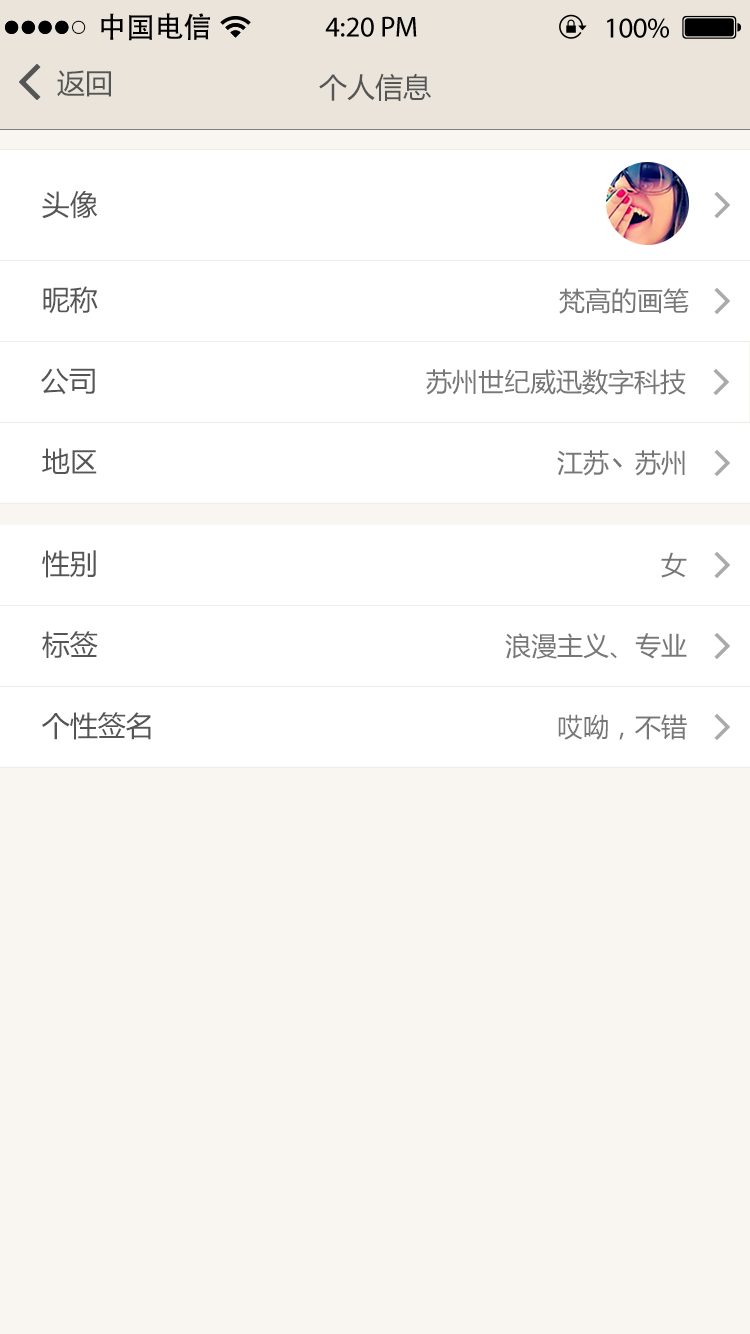
<style>
.page{position:relative;width:750px;height:1334px;background:#f9f5f1}
.page>*{position:absolute;margin:0}
.t1{font:28.8px "AdobeHeitiStd-Regular";color:#000000}
.t2{font:28.8px "MyriadPro-Regular";color:#000000}
.t3{font:28px "MicrosoftYaHei";color:#555555}
.t4{font:26px "MicrosoftYaHei";color:#777777}
</style>
<div class="page">
<p class="t1" style="left:101px;top:13px;width:109px;height:28px">中国电信</p>
<p class="t2" style="left:325px;top:16px;width:92px;height:21px">4:20 PM</p>
<p class="t2" style="left:607px;top:18px;width:62px;height:20px">100%</p>
<p class="t3" style="left:57px;top:70px;width:54px;height:27px">返回</p>
<p class="t3" style="left:319px;top:73px;width:112px;height:28px">个人信息</p>
<p class="t3" style="left:42px;top:191px;width:56px;height:28px">头像</p>
<p class="t3" style="left:43px;top:286px;width:55px;height:28px">昵称</p>
<p class="t4" style="left:559px;top:288px;width:130px;height:26px">梵高的画笔</p>
<p class="t3" style="left:41px;top:368px;width:54px;height:27px">公司</p>
<p class="t4" style="left:426px;top:369px;width:260px;height:26px">苏州世纪威迅数字科技</p>
<p class="t3" style="left:42px;top:448px;width:55px;height:26px">地区</p>
<p class="t4" style="left:557px;top:450px;width:128px;height:26px">江苏丶苏州</p>
<p class="t3" style="left:42px;top:550px;width:54px;height:28px">性别</p>
<p class="t4" style="left:661px;top:552px;width:26px;height:26px">女</p>
<p class="t3" style="left:42px;top:631px;width:56px;height:27px">标签</p>
<p class="t4" style="left:505px;top:633px;width:182px;height:26px">浪漫主义、专业</p>
<p class="t3" style="left:42px;top:712px;width:109px;height:28px">个性签名</p>
<p class="t4" style="left:558px;top:714px;width:129px;height:26px">哎呦，不错</p>
</div>
